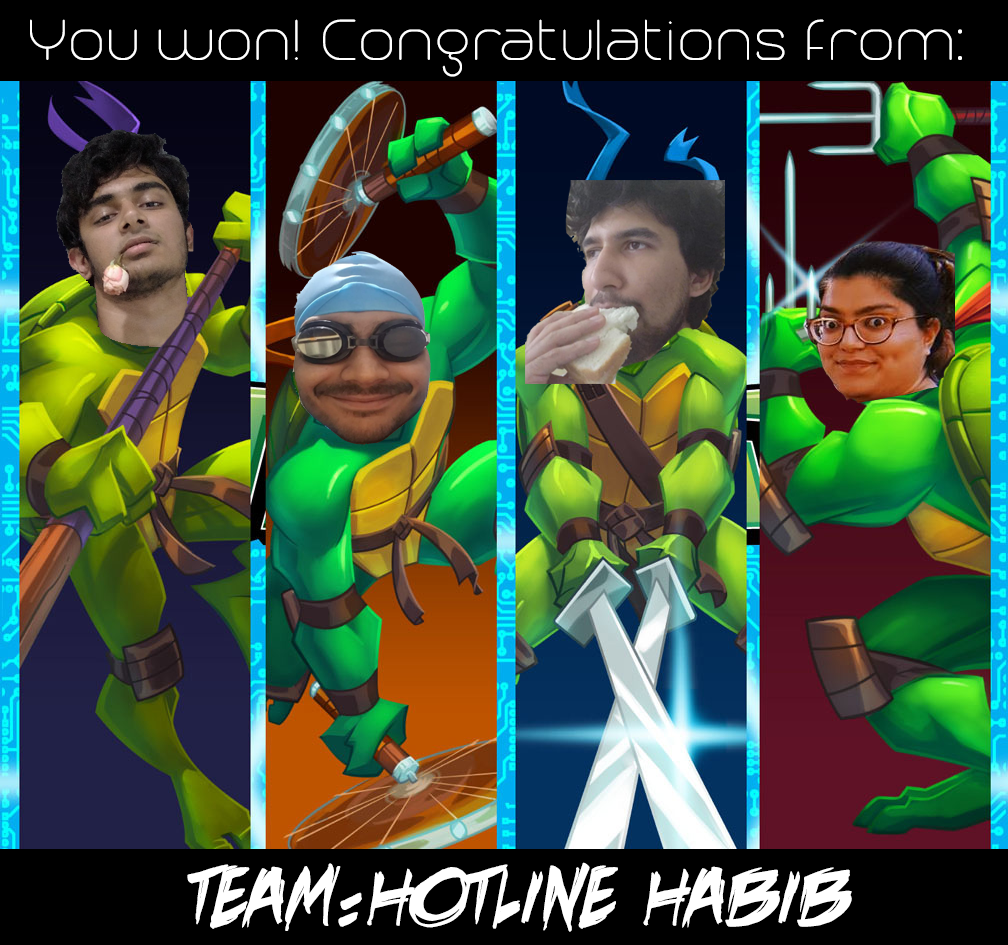
<style>
.page{position:relative;width:1008px;height:945px}
.page>*{position:absolute;margin:0}
.t1{font:72px "Trench-Thin";color:#ffffff}
.t2{font:100px "DeathRattleBB";color:#ffffff}
</style>
<div class="page">
<p class="t1" style="left:30px;top:19px;width:932px;height:58px">You won! Congratulations from:</p>
<p class="t2" style="left:187px;top:862px;width:665px;height:70px">TEAM:HOTLINE HABIB</p>
</div>
